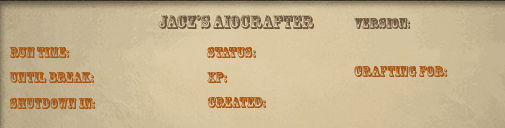
<style>
.page{position:relative;width:505px;height:128px}
.page>*{position:absolute;margin:0}
.t1{font:18px "RosewoodStd-Regular";color:#6d543e}
.t2{font:14px "RosewoodStd-Regular";color:#6d543e}
.t3{font:14px "RosewoodStd-Regular";color:#a9550b}
</style>
<div class="page">
<p class="t1" style="left:158px;top:15px;width:156px;height:14px">Jacz’s aiocrafter</p>
<p class="t2" style="left:354px;top:17px;width:57px;height:12px">Version:</p>
<p class="t3" style="left:10px;top:47px;width:60px;height:11px">Run Time:</p>
<p class="t3" style="left:207px;top:46px;width:49px;height:12px">Status:</p>
<p class="t3" style="left:354px;top:65px;width:94px;height:12px">Crafting For:</p>
<p class="t3" style="left:10px;top:72px;width:84px;height:11px">Until break:</p>
<p class="t3" style="left:207px;top:72px;width:21px;height:11px">XP:</p>
<p class="t3" style="left:10px;top:97px;width:86px;height:12px">Shutdown in:</p>
<p class="t3" style="left:208px;top:96px;width:58px;height:12px">Created:</p>
</div>
